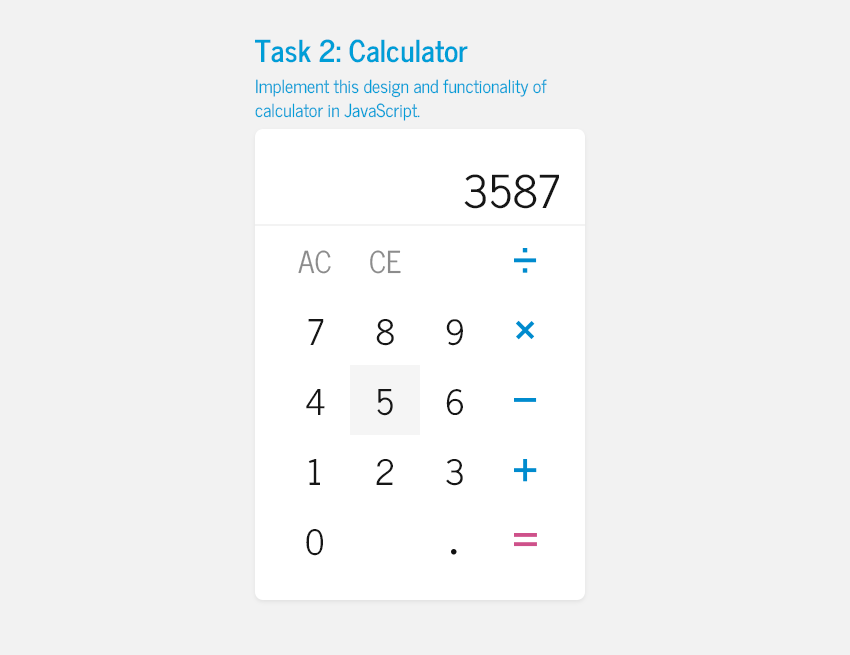
<style>
.page{position:relative;width:850px;height:655px;background:#f2f2f2}
.page>*{position:absolute;margin:0}
.t1{font:30px "NewsCycle-Bold";color:#009ed7}
.t2{font:18px "NewsCycle";color:#009ed7}
.t3{font:45px "NewsCycle";color:#161616}
.t4{font:30px "NewsCycle";color:#8c8c8c}
.t5{font:35px "NewsCycle";color:#161616}
</style>
<div class="page">
<p class="t1" style="left:255px;top:39px;width:213px;height:24px">Task 2: Calculator</p>
<p class="t2" style="left:256px;top:79px;width:291px;height:19px">Implement this design and functionality of</p>
<p class="t2" style="left:255px;top:103px;width:165px;height:18px">calculator in JavaScript.</p>
<p class="t3" style="left:464px;top:174px;width:95px;height:35px">3587</p>
<p class="t4" style="left:298px;top:250px;width:33px;height:24px">AC</p>
<p class="t4" style="left:370px;top:250px;width:31px;height:24px">CE</p>
<p class="t5" style="left:308px;top:319px;width:16px;height:26px">7</p>
<p class="t5" style="left:376px;top:319px;width:18px;height:27px">8</p>
<p class="t5" style="left:446px;top:319px;width:17px;height:27px">9</p>
<p class="t5" style="left:306px;top:389px;width:19px;height:26px">4</p>
<p class="t5" style="left:377px;top:389px;width:16px;height:27px">5</p>
<p class="t5" style="left:446px;top:389px;width:17px;height:26px">6</p>
<p class="t5" style="left:308px;top:459px;width:12px;height:26px">1</p>
<p class="t5" style="left:376px;top:459px;width:17px;height:26px">2</p>
<p class="t5" style="left:446px;top:459px;width:17px;height:27px">3</p>
<p class="t5" style="left:306px;top:529px;width:17px;height:27px">0</p>
</div>
